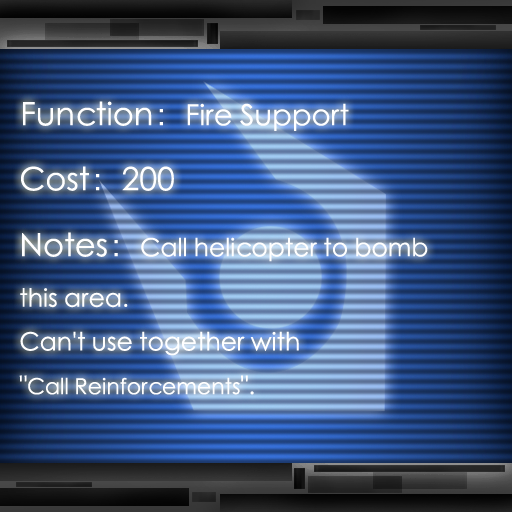
<style>
.page{position:relative;width:512px;height:512px}
.page>*{position:absolute;margin:0}
.t1{font:29px "STXihei";color:#ffffff}
.t2{font:32px "STXihei";color:#ffffff}
.t3{font:25px "STXihei";color:#ffffff}
.t4{font:22px "STXihei";color:#ffffff}
</style>
<div class="page">
<p class="t1" style="left:23px;top:101px;width:326px;height:30px"><span class="t2">Function：</span>Fire Support</p>
<p class="t2" style="left:21px;top:166px;width:153px;height:25px">Cost：200</p>
<p class="t3" style="left:19px;top:232px;width:409px;height:163px"><span class="t2">Notes：</span>Call helicopter to bomb <br>this area.<br>Can't use together with <br>"<span class="t4">Call Reinforcements</span>".</p>
</div>
